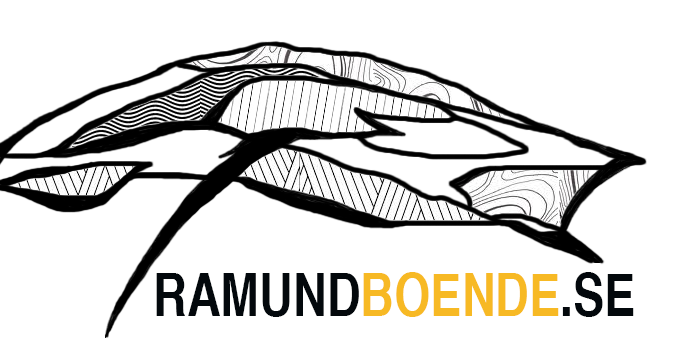
<style>
.page{position:relative;width:675px;height:360px;background:#ffffff}
.page>*{position:absolute;margin:0}
.t1{font:58.3px "Helvetica-Bold";color:#03080c;scale:0.8 1}
.t2{font:58.3px "Helvetica-Bold";color:#f7b924;scale:0.8 1}
</style>
<div class="page">
<p class="t1" style="left:156px;top:272px;width:478px;height:45px">RAMUND<span class="t2">BOENDE</span>.SE</p>
</div>
